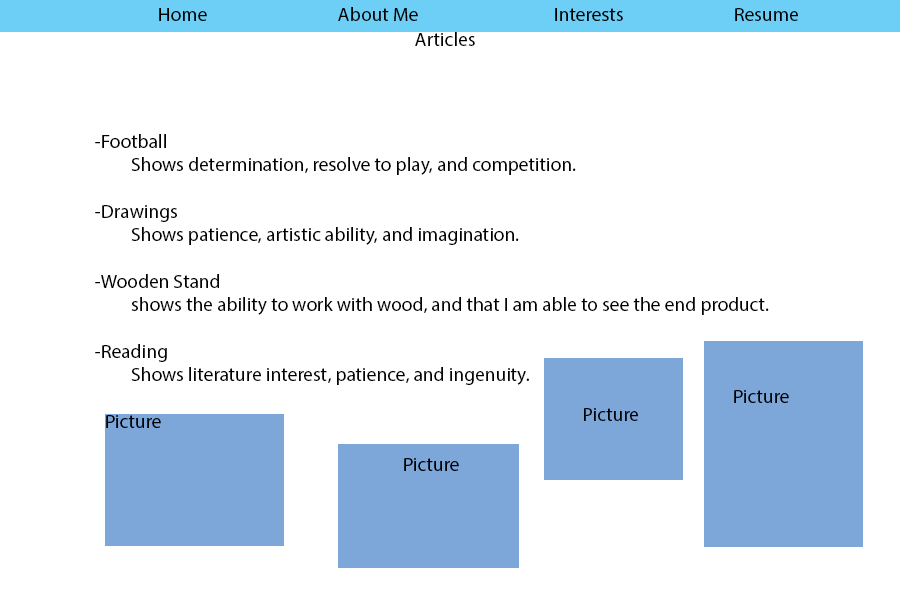
<style>
.page{position:relative;width:900px;height:600px;background:#ffffff}
.page>*{position:absolute;margin:0}
.t1{font:19.4px "MyriadPro-Regular";color:#000000}
</style>
<div class="page">
<p class="t1" style="left:159px;top:7px;width:639px;height:14px">Home    About Me    Interests    Resume</p>
<p class="t1" style="left:415px;top:32px;width:60px;height:14px">Articles</p>
<p class="t1" style="left:95px;top:134px;width:674px;height:251px">-Football<br> Shows determination, resolve to play, and competition.<br><br>-Drawings<br> Shows patience, artistic ability, and imagination.<br><br>-Wooden Stand<br> shows the ability to work with wood, and that I am able to see the end product.<br><br>-Reading<br> Shows literature interest, patience, and ingenuity.</p>
<p class="t1" style="left:734px;top:390px;width:55px;height:13px">Picture</p>
<p class="t1" style="left:584px;top:408px;width:54px;height:13px">Picture</p>
<p class="t1" style="left:106px;top:415px;width:55px;height:13px">Picture</p>
<p class="t1" style="left:404px;top:458px;width:55px;height:13px">Picture</p>
</div>
